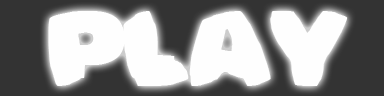
<style>
.page{position:relative;width:384px;height:96px;background:#fefefe}
.page>*{position:absolute;margin:0}
.t1{font:100px "Bomberman";color:#fefefe}
</style>
<div class="page">
<p class="t1" style="left:48px;top:11px;width:300px;height:75px">Play</p>
</div>
